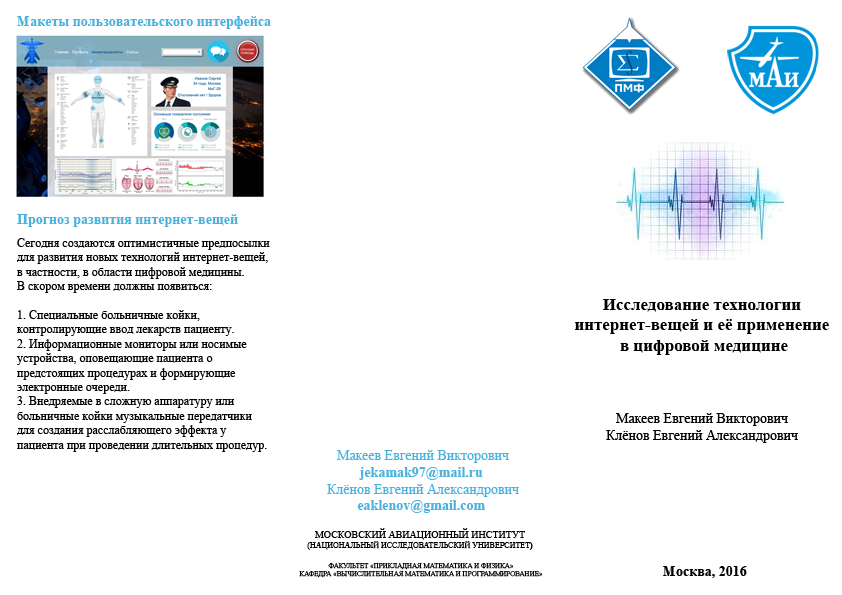
<style>
.page{position:relative;width:842px;height:595px;background:#ffffff}
.page>*{position:absolute;margin:0}
.t1{font:14px "TimesNewRomanPS-BoldMT";color:#4bb2de}
.t2{font:12px "TimesNewRomanPSMT";color:#000000}
.t3{font:17px "TimesNewRomanPS-BoldMT";color:#000000}
.t4{font:14px "TimesNewRomanPSMT";color:#000000}
.t5{font:14px "TimesNewRomanPSMT";color:#4bb2de}
.t6{font:8px "TimesNewRomanPSMT";color:#000000}
.t7{font:10px "TimesNewRomanPSMT";color:#000000}
.t8{font:8px "TimesNewRomanPS-BoldMT";color:#000000}
.t9{font:7px "TimesNewRomanPSMT";color:#000000}
.t10{font:14px "TimesNewRomanPS-BoldMT";color:#000000}
</style>
<div class="page">
<p class="t1" style="left:17px;top:16px;width:254px;height:13px">Макеты пользовательского интерфейса</p>
<p class="t1" style="left:17px;top:214px;width:221px;height:13px">Прогноз развития интернет-вещей</p>
<p class="t2" style="left:16px;top:238px;width:254px;height:214px">Сегодня создаются оптимистичные предпосылки <br>для развития новых технологий интернет-вещей, <br>в частности, в области цифровой медицины. <br>В скором времени должны появиться:<br><br>1. Специальные больничные койки, <br>контролирующие ввод лекарств пациенту.<br>2. Информационные мониторы или носимые <br>устройства, оповещающие пациента о <br>предстоящих процедурах и формирующие <br>электронные очереди.<br>3. Внедряемые в сложную аппаратуру или <br>больничные койки музыкальные передатчики <br>для создания расслабляющего эффекта у <br>пациента при проведении длительных процедур.</p>
<p class="t3" style="left:575px;top:299px;width:254px;height:56px;text-align:center">Исследование технологии <br>интернет-вещей и её применение <br>в цифровой медицине</p>
<p class="t4" style="left:606px;top:413px;width:192px;height:30px;text-align:center">Макеев Евгений Викторович<br>Клёнов Евгений Александрович</p>
<p class="t5" style="left:327px;top:450px;width:192px;height:63px;text-align:center">Макеев Евгений Викторович<br><span class="t1">jekamak97@mail.ru <br></span>Клёнов Евгений Александрович<br><span class="t1">eaklenov@gmail.com</span></p>
<p class="t6" style="left:307px;top:528px;width:226px;height:22px;text-align:center"><span class="t7">МОСКОВСКИЙ АВИАЦИОННЫЙ ИНСТИТУТ<br></span>(НАЦИОНАЛЬНЫЙ ИССЛЕДОВАТЕЛЬСКИЙ УНИВЕРСИТЕТ<span class="t8">)</span></p>
<p class="t9" style="left:299px;top:563px;width:244px;height:15px;text-align:center">ФАКУЛЬТЕТ «ПРИКЛАДНАЯ МАТЕМАТИКА И ФИЗИКА»<br>КАФЕДРА «ВЫЧИСЛИТЕЛЬНАЯ МАТЕМАТИКА И ПРОГРАММИРОВАНИЕ»</p>
<p class="t10" style="left:663px;top:566px;width:84px;height:12px">Москва, 2016</p>
</div>
